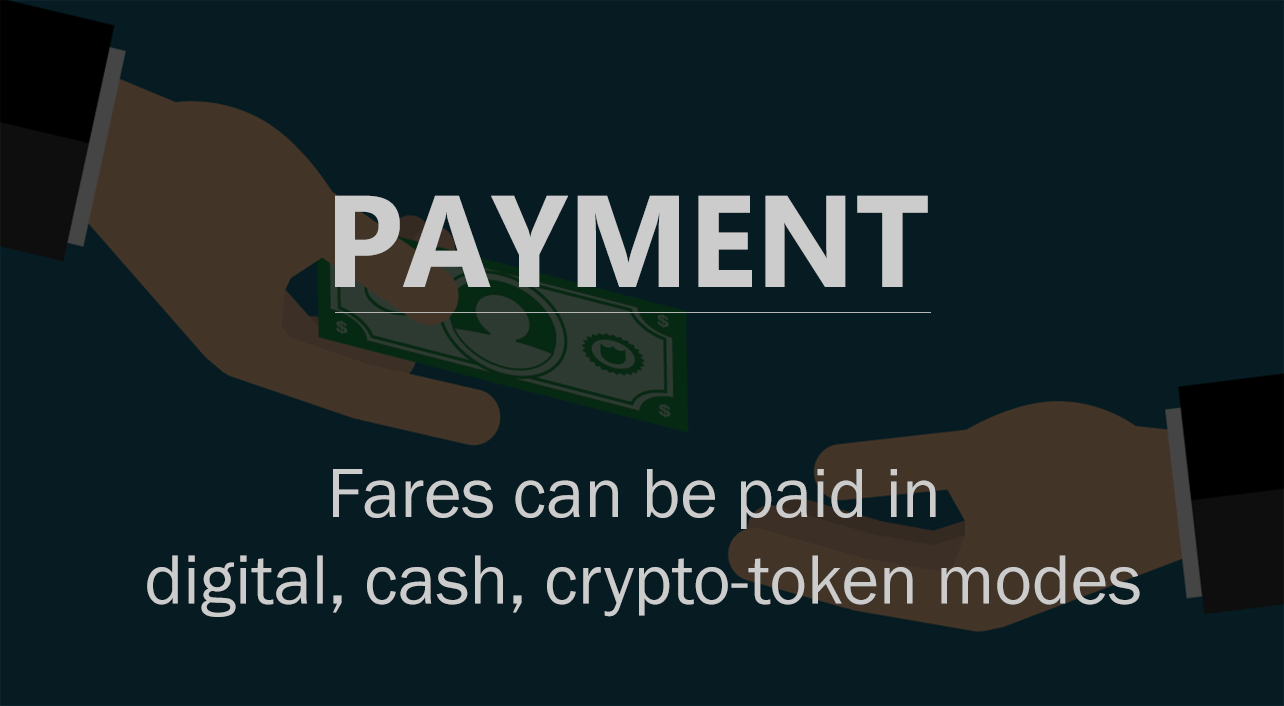
<style>
.page{position:relative;width:1284px;height:706px;background:#061c22}
.page>*{position:absolute;margin:0}
.t1{font:130px "MicrosoftTaiLe-Bold";color:#cccccc}
.t2{font:72px "FranklinGothic-Book";color:#cccccc}
</style>
<div class="page">
<p class="t1" style="left:335px;top:195px;width:593px;height:92px">PAYMENT</p>
<p class="t2" style="left:147px;top:469px;width:993px;height:148px;text-align:center">Fares can be paid in <br>digital, cash, crypto-token modes</p>
</div>
